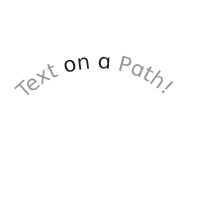
<style>
.page{position:relative;width:200px;height:200px;background:#ffffff}
.page>*{position:absolute;margin:0}
.t1{font:20.8px "DejaVuSans";color:#969696}
.t2{font:20.8px "DejaVuSans";color:#202020}
</style>
<div class="page">
<p class="t1" style="left:14px;top:55px;width:159px;height:41px">Text <span class="t2">on a</span> Path!</p>
</div>
